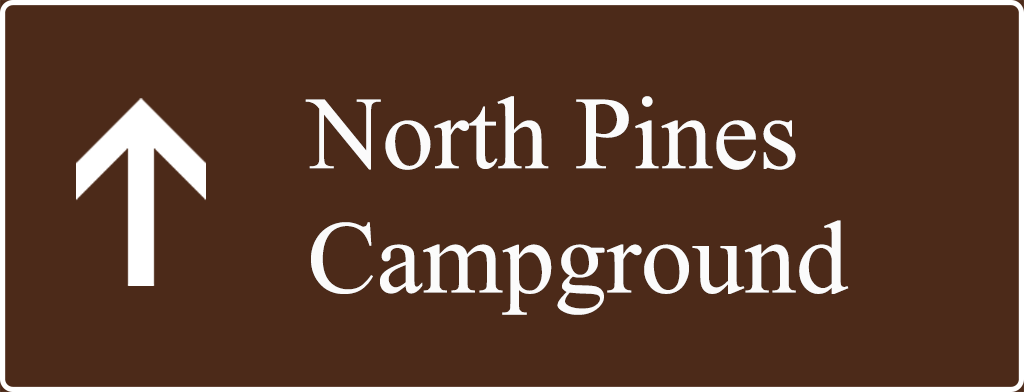
<style>
.page{position:relative;width:1024px;height:392px;background:#4c2a19}
.page>*{position:absolute;margin:0}
.t1{font:103.5px "IskoolaPota";color:#fbfbfb}
</style>
<div class="page">
<p class="t1" style="left:305px;top:96px;width:544px;height:219px">North Pines<br>Campground</p>
</div>
